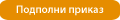
<style>
.page{position:relative;width:120px;height:20px;background:#e68d00}
.page>*{position:absolute;margin:0}
.t1{font:11px "MyriadPro-Semibold";color:#ffffff}
</style>
<div class="page">
<p class="t1" style="left:16px;top:5px;width:88px;height:11px">Подполни приказ</p>
</div>
